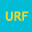
<style>
.page{position:relative;width:32px;height:32px;background:#00bcd4}
.page>*{position:absolute;margin:0}
.t1{font:12.6px "TrebuchetMS-Bold";color:#ead730}
</style>
<div class="page">
<p class="t1" style="left:5px;top:11px;width:24px;height:10px">URF</p>
</div>
